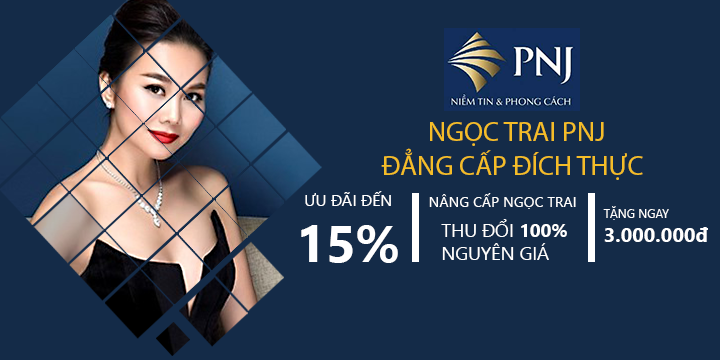
<style>
.page{position:relative;width:720px;height:360px;background:#142b48}
.page>*{position:absolute;margin:0}
.t1{font:27.7px "MyriadPro-Regular";color:#f4bd28}
.t2{font:16px "LeelawadeeUI";color:#ffffff}
.t3{font:14.3px "LeelawadeeUI";color:#ffffff}
.t4{font:20.1px "LeelawadeeUI-Bold";color:#ffffff}
.t5{font:12px "LeelawadeeUI";color:#ffffff}
.t6{font:18.6px "LeelawadeeUI";color:#ffffff}
.t7{font:18.6px "LeelawadeeUI-Bold";color:#ffffff}
.t8{font:51.6px "LeelawadeeUI-Bold";color:#ffffff}
</style>
<div class="page">
<p class="t1" style="left:430px;top:122px;width:174px;height:24px">NGỌC TRAI PNJ</p>
<p class="t1" style="left:381px;top:148px;width:262px;height:32px">ĐẲNG CẤP ĐÍCH THỰC</p>
<p class="t2" style="left:305px;top:191px;width:86px;height:15px">ƯU ĐÃI ĐẾN</p>
<p class="t3" style="left:429px;top:193px;width:147px;height:16px">NÂNG CẤP NGỌC TRAI</p>
<p class="t4" style="left:603px;top:206px;width:105px;height:36px"><span class="t5">TẶNG NGAY<br></span>3.000.000đ</p>
<p class="t6" style="left:441px;top:219px;width:126px;height:41px">THU ĐỔI <span class="t7">100%<br></span>NGUYÊN GIÁ</p>
<p class="t8" style="left:301px;top:225px;width:97px;height:38px">15%</p>
</div>
